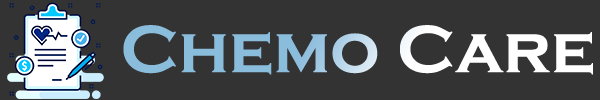
<style>
.page{position:relative;width:600px;height:100px;background:#333333}
.page>*{position:absolute;margin:0}
.t1{font:69.3px "CopperplateGothic-Bold"}
</style>
<div class="page">
<p class="t1" style="left:123px;top:25px;width:470px;height:50px">Chemo Care</p>
</div>
